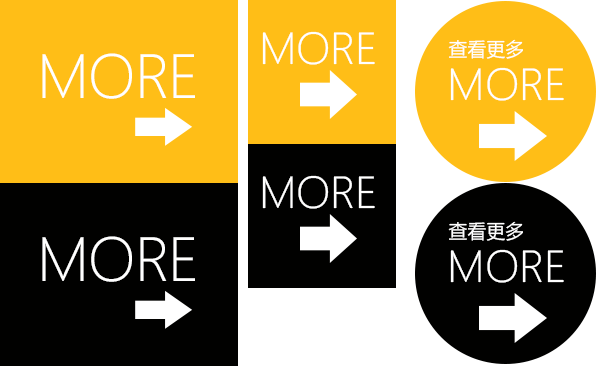
<style>
.page{position:relative;width:601px;height:366px;background:#ffbe17}
.page>*{position:absolute;margin:0}
.t1{font:41.6px "MicrosoftYaHeiUILight";color:#ffffff;text-transform:uppercase}
.t2{font:19.3px "MicrosoftYaHeiUI";color:#ffffff}
.t3{font:57.8px "MicrosoftYaHeiUILight";color:#ffffff;text-transform:uppercase}
.t4{font:41.8px "MicrosoftYaHeiUILight";color:#ffffff;text-transform:uppercase}
</style>
<div class="page">
<p class="t1" style="left:262px;top:31px;width:113px;height:34px">more</p>
<p class="t2" style="left:448px;top:39px;width:75px;height:20px">查看更多</p>
<p class="t3" style="left:42px;top:53px;width:153px;height:46px">more</p>
<p class="t4" style="left:450px;top:67px;width:114px;height:34px">more</p>
<p class="t1" style="left:262px;top:175px;width:113px;height:34px">more</p>
<p class="t2" style="left:448px;top:221px;width:75px;height:20px">查看更多</p>
<p class="t3" style="left:42px;top:236px;width:153px;height:46px">more</p>
<p class="t4" style="left:450px;top:249px;width:114px;height:34px">more</p>
</div>
